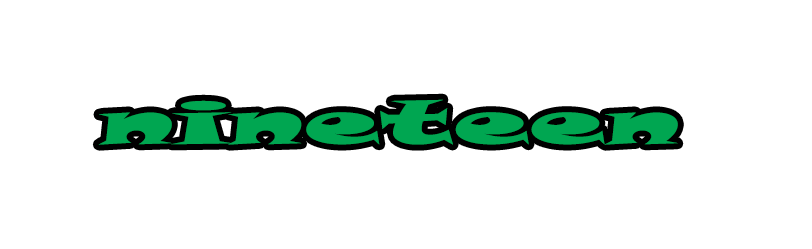
<style>
.page{position:relative;width:812px;height:249px;background:#ffffff}
.page>*{position:absolute;margin:0}
.t1{font:60px "SnapITC-Regular";color:#00a651;scale:2 1}
</style>
<div class="page">
<p class="t1" style="left:98px;top:99px;width:580px;height:46px">nineteen</p>
</div>
